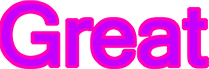
<style>
.page{position:relative;width:209px;height:69px;background:#ffffff}
.page>*{position:absolute;margin:0}
.t1{font:83.9px "MicrosoftSansSerif";color:#c400ff}
</style>
<div class="page">
<p class="t1" style="left:2px;top:3px;width:204px;height:63px">Great</p>
</div>
